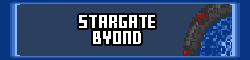
<style>
.page{position:relative;width:250px;height:60px;background:#2c3f5e}
.page>*{position:absolute;margin:0}
.t1{font:10px "FFFForward";color:#ffffff;scale:1.12 1}
</style>
<div class="page">
<p class="t1" style="left:79px;top:15px;width:76px;height:13px">STARGATE</p>
<p class="t1" style="left:93px;top:31px;width:48px;height:13px">BYOND</p>
</div>
